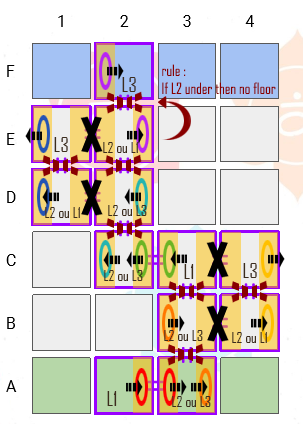
<style>
.page{position:relative;width:303px;height:424px;background:#ffffff}
.page>*{position:absolute;margin:0}
.t1{font:15px "AgencyFB-Reg";color:#890000}
.t2{font:20px "AgencyFB-Reg";color:#3c2c1d}
.t3{font:15px "AgencyFB-Reg";color:#3c2c1d}
</style>
<div class="page">
<p class="t1" style="left:162px;top:64px;width:114px;height:31px">rule : <br>If L2 under then no floor</p>
<p class="t2" style="left:122px;top:77px;width:14px;height:15px">L3</p>
<p class="t2" style="left:54px;top:137px;width:14px;height:15px">L3</p>
<p class="t3" style="left:103px;top:142px;width:35px;height:11px">L2 ou L1</p>
<p class="t3" style="left:45px;top:207px;width:35px;height:11px">L2 ou L1</p>
<p class="t3" style="left:108px;top:205px;width:39px;height:11px">L2 ou L3</p>
<p class="t3" style="left:104px;top:270px;width:39px;height:11px">L2 ou L3</p>
<p class="t2" style="left:184px;top:264px;width:10px;height:15px">L1</p>
<p class="t2" style="left:243px;top:263px;width:14px;height:15px">L3</p>
<p class="t3" style="left:164px;top:330px;width:39px;height:11px">L2 ou L3</p>
<p class="t3" style="left:232px;top:332px;width:35px;height:11px">L2 ou L1</p>
<p class="t2" style="left:107px;top:391px;width:10px;height:15px">L1</p>
<p class="t3" style="left:172px;top:396px;width:39px;height:11px">L2 ou L3</p>
</div>
